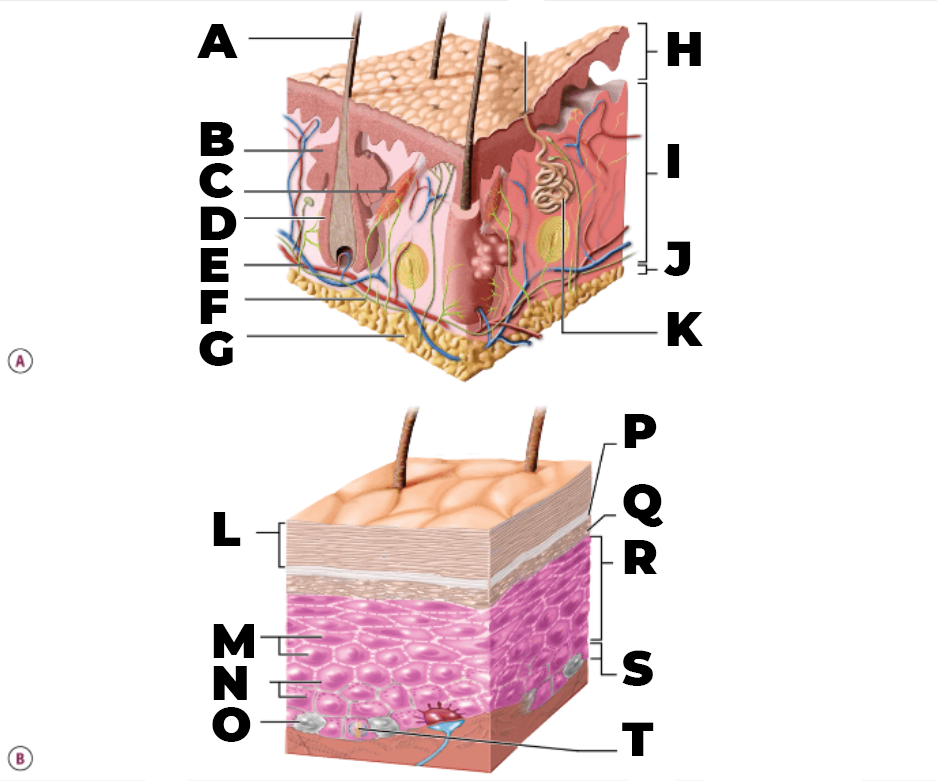
<style>
.page{position:relative;width:937px;height:781px;background:#ffffff}
.page>*{position:absolute;margin:0}
.t1{font:48px/14px "Montserrat-Black";color:#000000}
</style>
<div class="page">
<p class="t1" style="left:197px;top:24px;width:41px;height:342px">A<br><br><br><br><br><br><br>B<br><br><br>C<br><br><br>D<br><br><br>E<br><br><br>F<br><br><br>G</p>
<p class="t1" style="left:663px;top:32px;width:40px;height:314px">H<br><br><br><br><br><br><br><br>I<br><br><br><br><br><br><br>J<br><br><br><br><br>K</p>
<p class="t1" style="left:622px;top:414px;width:42px;height:342px">P<br><br><br><br><br>Q<br><br><br><br>R<br><br><br><br><br><br><br><br>S<br><br><br><br><br>T</p>
<p class="t1" style="left:212px;top:512px;width:43px;height:230px">L<br><br><br><br><br><br><br><br>M<br><br><br>N<br><br><br>O</p>
</div>
